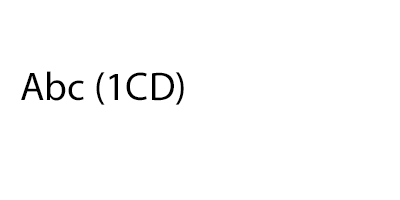
<style>
.page{position:relative;width:400px;height:200px;background:#ffffff}
.page>*{position:absolute;margin:0}
.t1{font:40px "MyriadPro-Regular";color:#000000}
</style>
<div class="page">
<p class="t1" style="left:21px;top:71px;width:163px;height:34px">Abc (1CD)</p>
</div>
